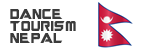
<style>
.page{position:relative;width:141px;height:52px;background:#ffffff}
.page>*{position:absolute;margin:0}
.t1{font:10px "Guardians";color:#3b3b3b}
</style>
<div class="page">
<p class="t1" style="left:10px;top:9px;width:66px;height:34px">DANCE<br>TOURISM<br>NEPAL</p>
</div>
